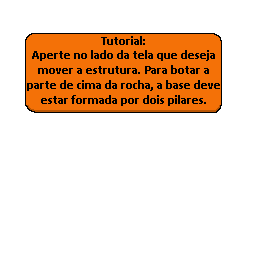
<style>
.page{position:relative;width:256px;height:256px;background:#ffffff}
.page>*{position:absolute;margin:0}
.t1{font:12.5px "Calibri-Bold";color:#000000}
</style>
<div class="page">
<p class="t1" style="left:101px;top:36px;width:44px;height:9px">Tutorial:</p>
<p class="t1" style="left:27px;top:50px;width:193px;height:56px;text-align:center">Aperte no lado da tela que deseja<br>mover a estrutura. Para botar a parte de cima da rocha, a base deve estar formada por dois pilares.</p>
</div>
